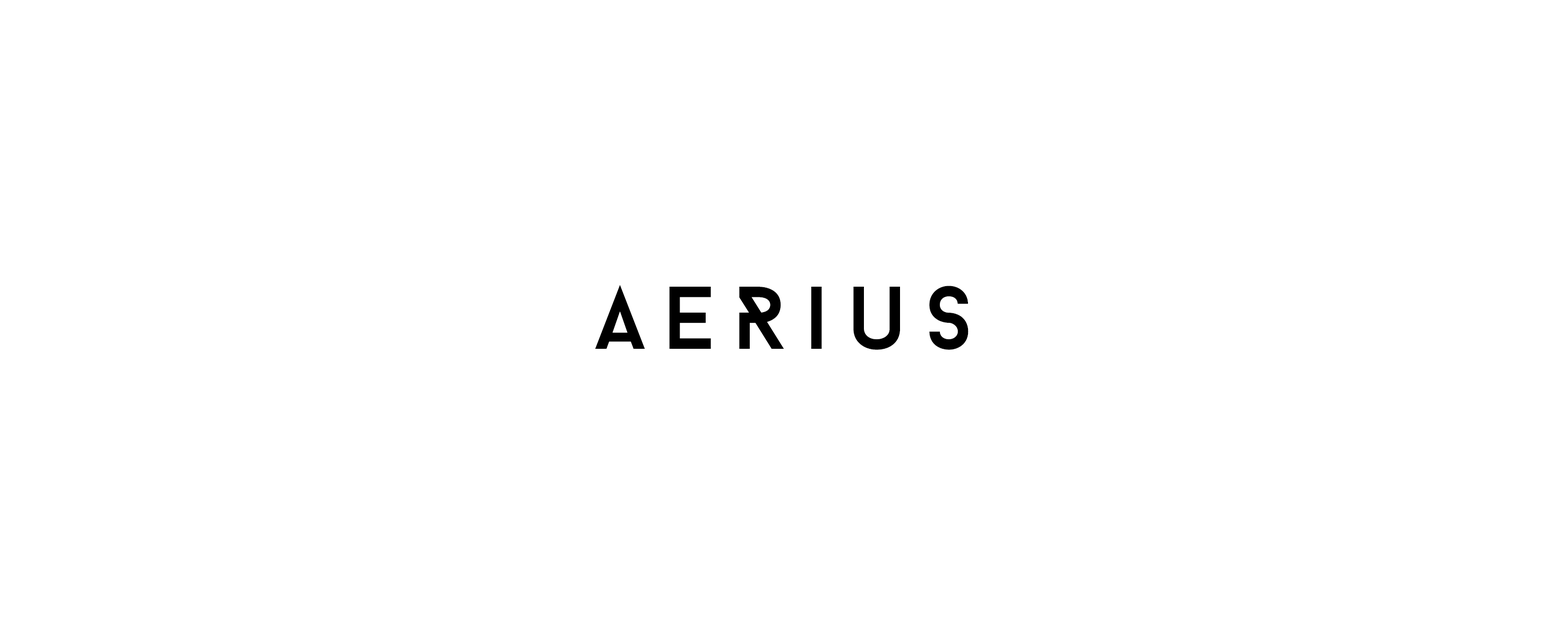
<style>
.page{position:relative;width:1568px;height:627px;background:#ffffff}
.page>*{position:absolute;margin:0}
.t1{font:88.5px "BaronNeue";letter-spacing:0.2em;color:#000000}
</style>
<div class="page">
<p class="t1" style="left:595px;top:285px;width:374px;height:65px">AERius</p>
</div>
